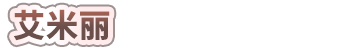
<style>
.page{position:relative;width:360px;height:50px;background:#ffffff}
.page>*{position:absolute;margin:0}
.t1{font:32px "SourceHanSansSC-Bold";font-weight:bold}
</style>
<div class="page">
<p class="t1" style="left:14px;top:9px;width:96px;height:32px">艾米丽</p>
</div>
